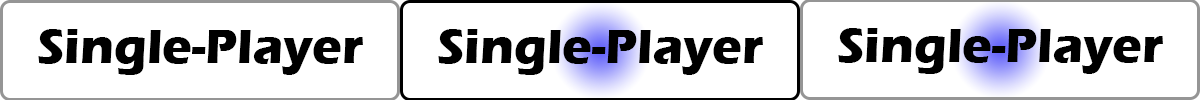
<style>
.page{position:relative;width:1200px;height:100px;background:#ffffff}
.page>*{position:absolute;margin:0}
.t1{font:50px "ErasITC-Bold";color:#010000}
.t2{font:50px "ErasITC-Bold";color:#000000}
</style>
<div class="page">
<p class="t1" style="left:38px;top:29px;width:325px;height:46px">Single-Player</p>
<p class="t2" style="left:438px;top:29px;width:325px;height:46px">Single-Player</p>
<p class="t2" style="left:838px;top:28px;width:325px;height:46px">Single-Player</p>
</div>
